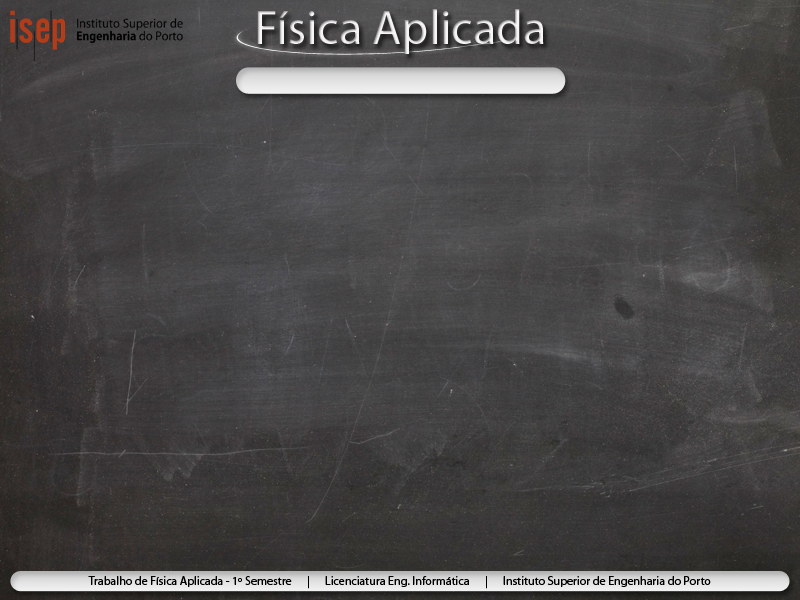
<style>
.page{position:relative;width:800px;height:600px}
.page>*{position:absolute;margin:0}
.t1{font:48px "MyriadPro-Regular";color:#f7f5f5}
.t2{font:12px "MyriadPro-Regular";color:#000000}
</style>
<div class="page">
<p class="t1" style="left:257px;top:9px;width:287px;height:45px">Física Aplicada</p>
<p class="t2" style="left:88px;top:576px;width:623px;height:13px">Trabalho de Física Aplicada - 1º Semestre      |      Licenciatura Eng. Informática      |      Instituto Superior de Engenharia do Porto</p>
</div>
